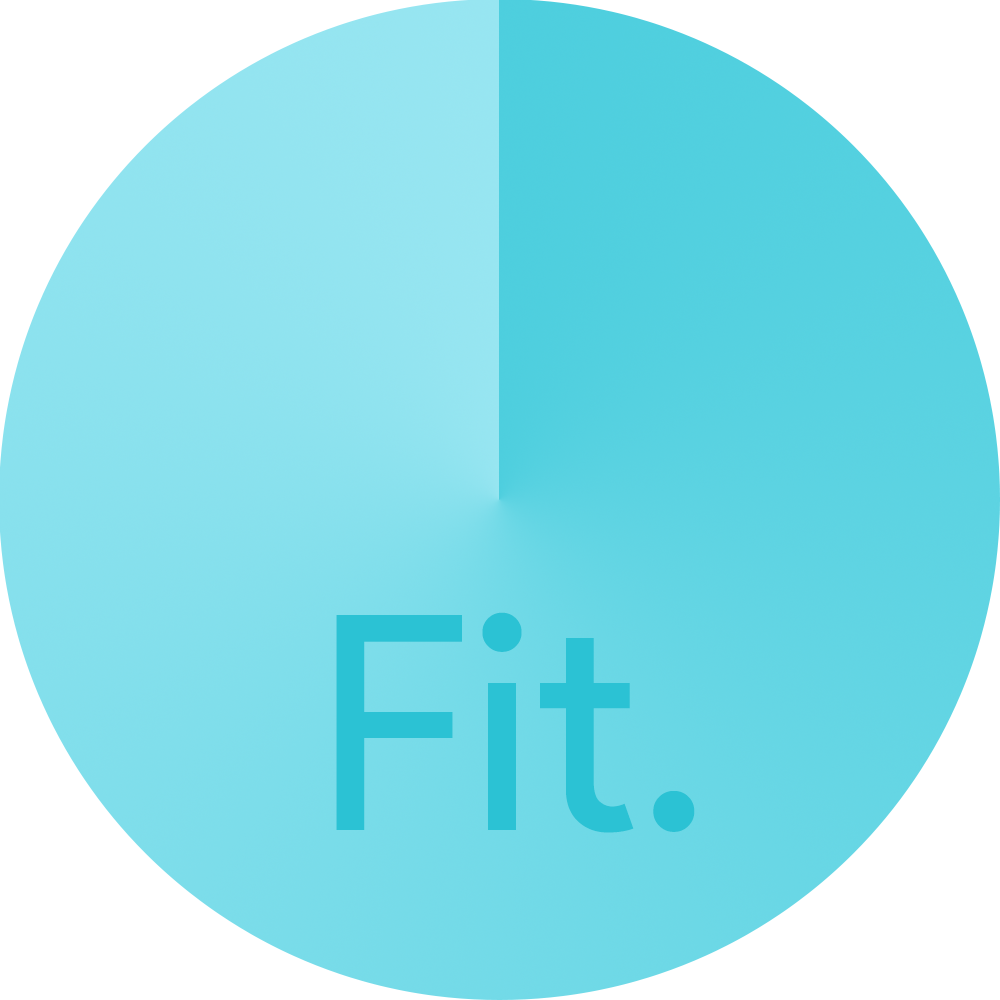
<style>
.page{position:relative;width:1000px;height:1000px;background:#ffffff}
.page>*{position:absolute;margin:0}
.t1{font:300px "ProductSans-Regular";color:#2bc2d4}
</style>
<div class="page">
<p class="t1" style="left:336px;top:612px;width:359px;height:221px">Fit.</p>
</div>
